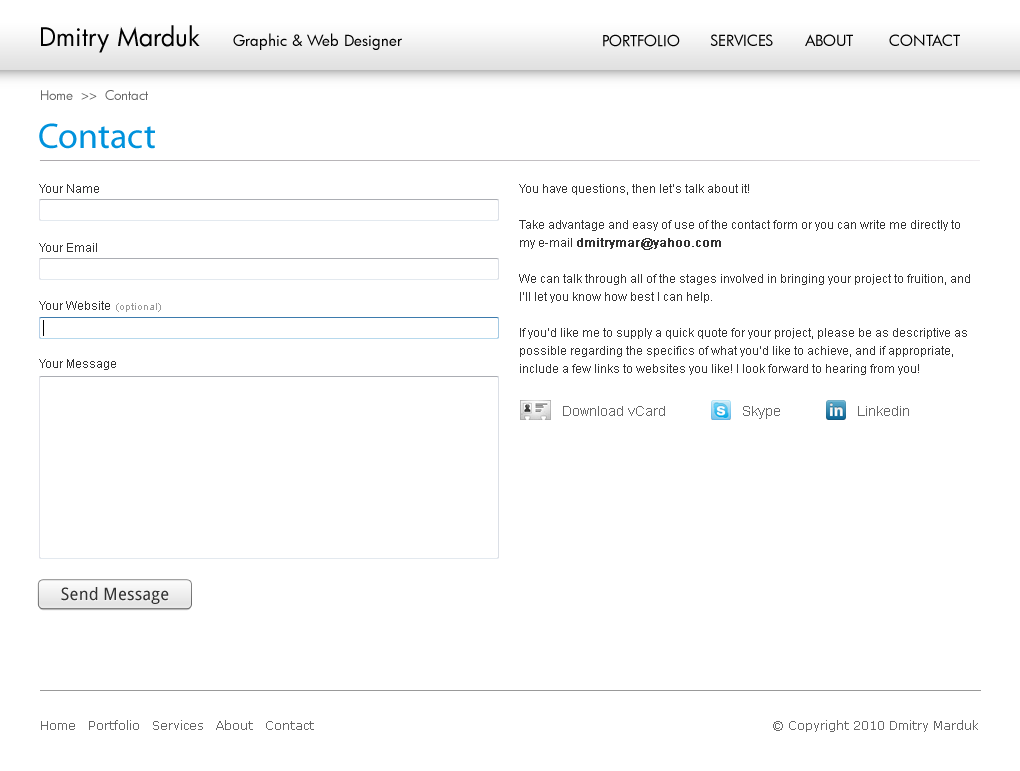
<style>
.page{position:relative;width:1020px;height:771px;background:#ffffff}
.page>*{position:absolute;margin:0}
.t1{font:25px "FuturaBk";color:#000000}
.t2{font:15px "FuturaBk";color:#000000}
.t3{font:13px "FuturaBk";color:#666666}
.t4{font:36px "MyriadPro-Regular";color:#0092dc}
.t5{font:12px "ArialMT";color:#333333}
.t6{font:12px/18px "ArialMT";color:#333333}
.t7{font:12px/18px "ArialMT";color:#333333;font-weight:bold}
.t8{font:10px "ArialMT";color:#999999}
.t9{font:14px "ArialMT";color:#666666}
.t10{font:17px "DroidSans";color:#333333}
</style>
<div class="page">
<p class="t1" style="left:41px;top:25px;width:159px;height:28px">Dmitry Marduk</p>
<p class="t2" style="left:233px;top:33px;width:169px;height:17px">Graphic &amp; Web Designer</p>
<p class="t2" style="left:603px;top:34px;width:77px;height:13px">PORTFOLIO</p>
<p class="t2" style="left:710px;top:34px;width:63px;height:12px">SERVICES</p>
<p class="t2" style="left:805px;top:34px;width:48px;height:12px">ABOUT</p>
<p class="t2" style="left:889px;top:34px;width:71px;height:12px">CONTACT</p>
<p class="t3" style="left:41px;top:90px;width:107px;height:10px">Home  &gt;&gt;  Contact</p>
<p class="t4" style="left:39px;top:123px;width:116px;height:26px">Contact</p>
<p class="t5" style="left:39px;top:184px;width:60px;height:9px">Your Name</p>
<p class="t6" style="left:519px;top:184px;width:451px;height:191px">You have questions, then let’s talk about it!<br><br>Take advantage and easy of use of the contact form or you can write me directly to my e-mail <span class="t7">dmitrymar@yahoo.com</span> <br><br>We can talk through all of the stages involved in bringing your project to fruition, and I’ll let you know how best I can help.<br><br>If you’d like me to supply a quick quote for your project, please be as descriptive as possible regarding the specifics of what you’d like to achieve, and if appropriate, include a few links to websites you like! I look forward to hearing from you!</p>
<p class="t5" style="left:39px;top:243px;width:58px;height:9px">Your Email</p>
<p class="t5" style="left:39px;top:301px;width:71px;height:9px">Your Website</p>
<p class="t8" style="left:116px;top:303px;width:45px;height:9px">(optional)</p>
<p class="t5" style="left:39px;top:359px;width:77px;height:11px">Your Message</p>
<p class="t9" style="left:563px;top:406px;width:102px;height:10px">Download vCard</p>
<p class="t9" style="left:743px;top:406px;width:37px;height:13px">Skype</p>
<p class="t9" style="left:858px;top:406px;width:51px;height:10px">Linkedin</p>
<p class="t10" style="left:61px;top:587px;width:108px;height:17px">Send Message</p>
</div>
